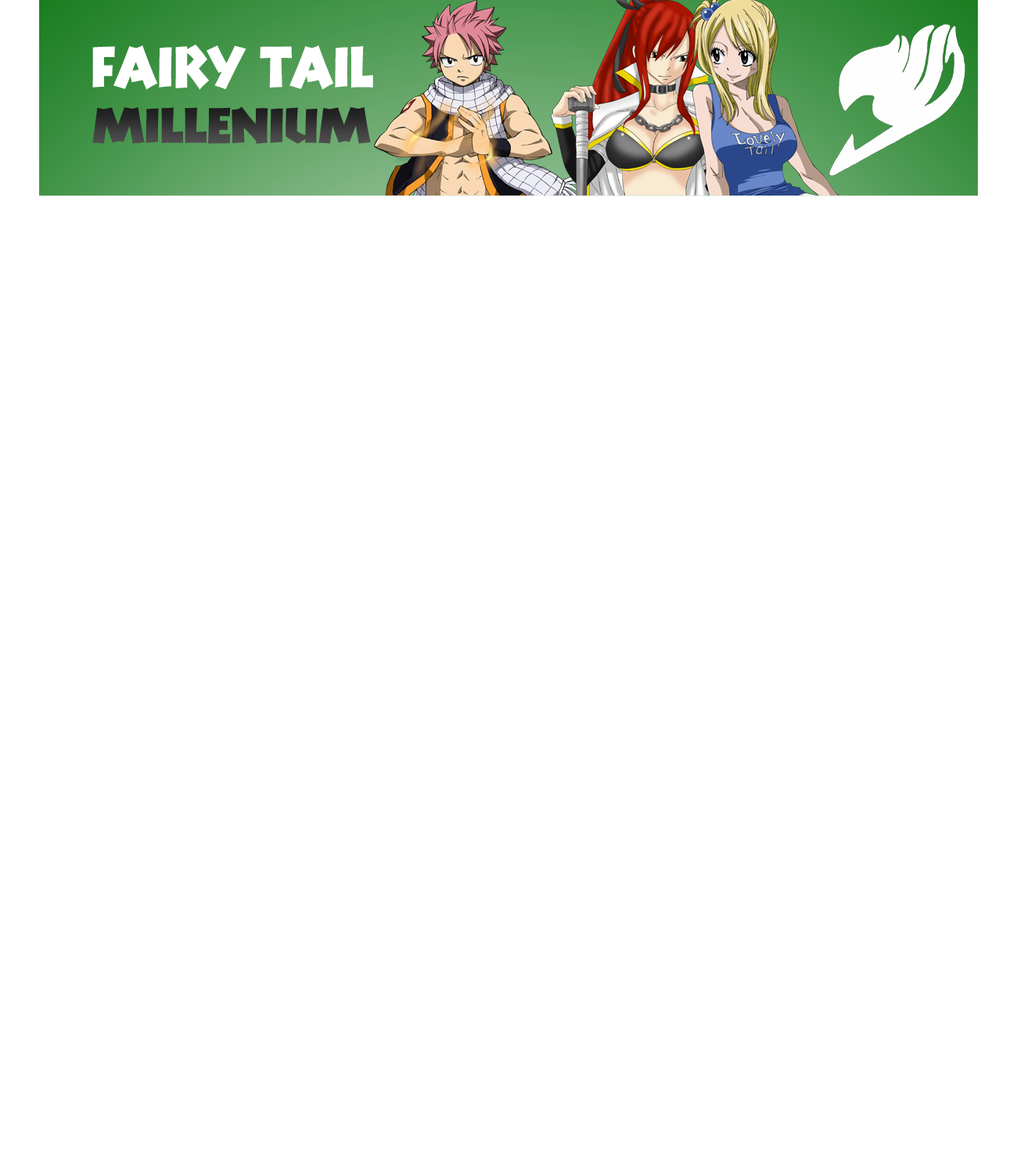
<style>
.page{position:relative;width:1017px;height:1173px;background:#ffffff}
.page>*{position:absolute;margin:0}
.t1{font:54.7px "ManitoLPStd";letter-spacing:-0.025em;color:#ffffff;scale:0.93 1}
.t2{font:54.7px "ManitoLPStd";letter-spacing:-0.025em;color:#373737;scale:0.93 1}
</style>
<div class="page">
<p class="t1" style="left:92px;top:45px;width:281px;height:45px">FAIRY TAIL</p>
<p class="t2" style="left:92px;top:106px;width:279px;height:38px">millenium</p>
</div>
